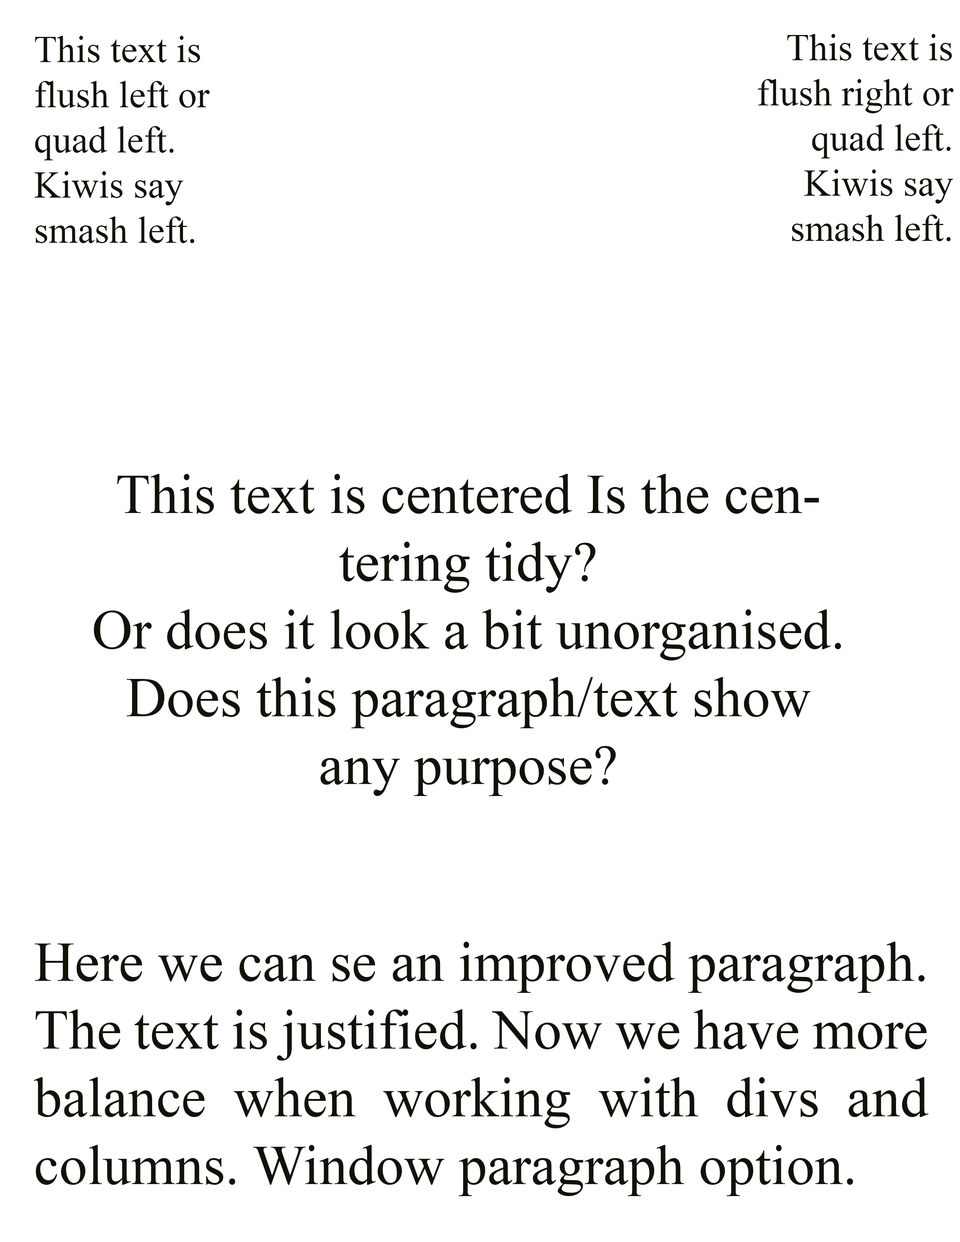
<style>
.page{position:relative;width:960px;height:1242px;background:#ffffff}
.page>*{position:absolute;margin:0}
.t1{font:37.6px "TimesNewRomanPSMT";color:#111207}
.t2{font:56.5px "TimesNewRomanPSMT";color:#111207}
</style>
<div class="page">
<p class="t1" style="left:34px;top:36px;width:176px;height:207px">This text is flush left or quad left. Kiwis say smash left.</p>
<p class="t1" style="left:758px;top:34px;width:196px;height:207px;text-align:right">This text is flush right or quad left. Kiwis say smash left.</p>
<p class="t2" style="left:94px;top:474px;width:747px;height:322px;text-align:center">This text is centered Is the centering tidy?<br>Or does it look a bit unorganised. Does this paragraph/text show any purpose?</p>
<p class="t2" style="left:34px;top:942px;width:895px;height:254px;text-align:justify">Here we can se an improved paragraph. The text is justified. Now we have more balance when working with divs and columns. Window paragraph option.</p>
</div>
